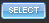
<style>
.page{position:relative;width:49px;height:23px}
.page>*{position:absolute;margin:0}
.t1{font:8px "ArialUnicodeMS";color:#ffffff}
</style>
<div class="page">
<p class="t1" style="left:9px;top:7px;width:30px;height:6px">SELECT</p>
</div>
